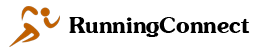
<style>
.page{position:relative;width:259px;height:48px;background:#ffffff}
.page>*{position:absolute;margin:0}
.t1{font:36px "JasmineUPCBold";color:#000000}
</style>
<div class="page">
<p class="t1" style="left:69px;top:17px;width:181px;height:20px">RunningConnect</p>
</div>
